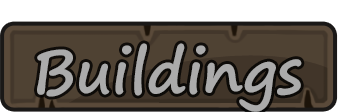
<style>
.page{position:relative;width:338px;height:112px}
.page>*{position:absolute;margin:0}
.t1{font:60px "SegoePrint-Bold";color:#ababab}
</style>
<div class="page">
<p class="t1" style="left:37px;top:43px;width:265px;height:69px">Buildings</p>
</div>
